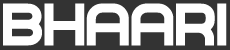
<style>
.page{position:relative;width:230px;height:50px;background:#ffffff}
.page>*{position:absolute;margin:0}
.t1{font:41.7px "NORMAL";color:#ffffff}
</style>
<div class="page">
<p class="t1" style="left:3px;top:3px;width:224px;height:43px">BHAARI</p>
</div>
